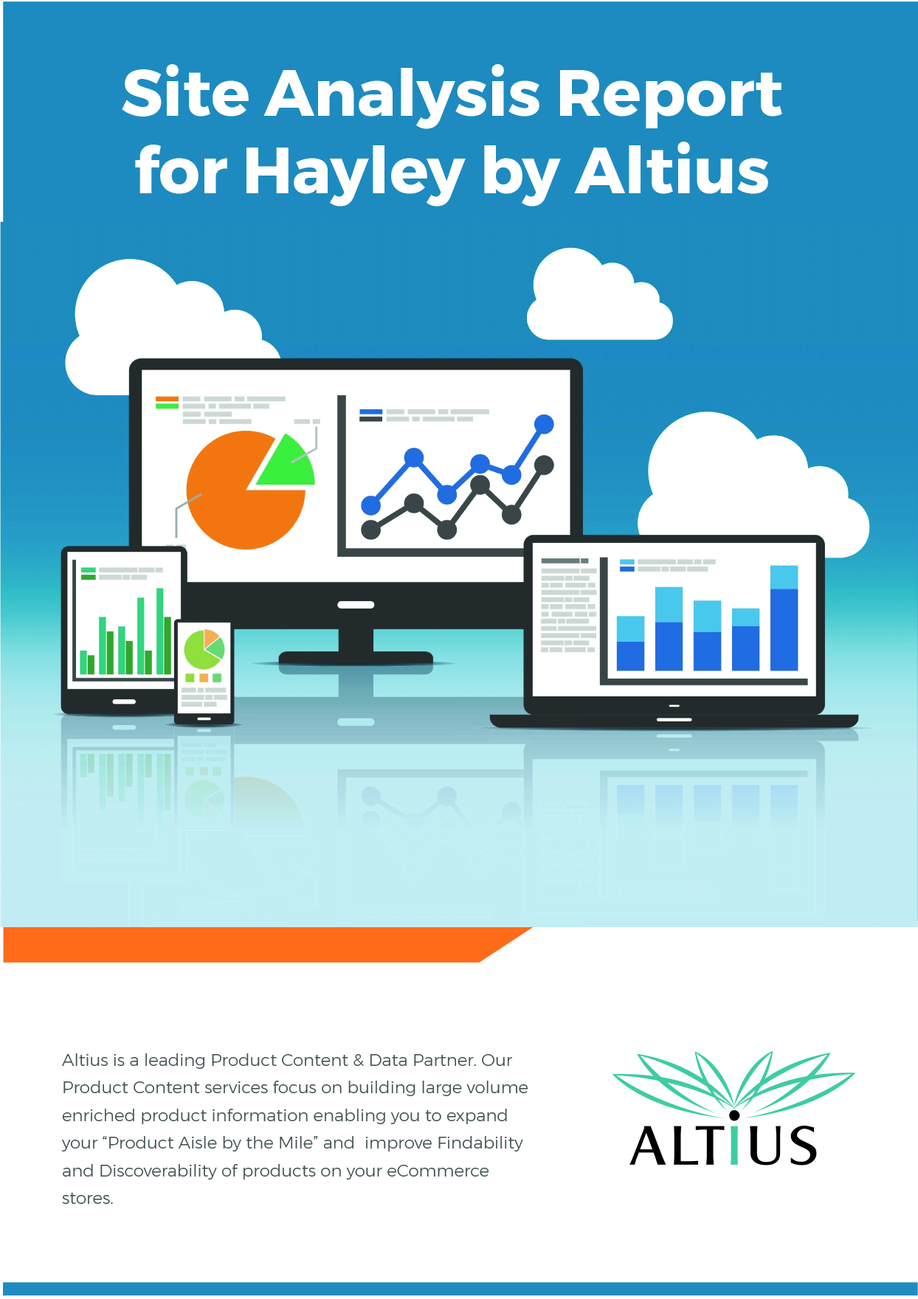
<style>
.page{position:relative;width:918px;height:1299px;background:#ffffff}
.page>*{position:absolute;margin:0}
.t1{font:64.6px "Montserrat-Bold";color:#ffffff}
.t2{font:16.9px/27.7px "Montserrat-Light";color:#445254}
</style>
<div class="page">
<p class="t1" style="left:122px;top:64px;width:660px;height:143px;text-align:center">Site Analysis Report<br>for Hayley by Altius</p>
<p class="t2" style="left:61px;top:1054px;width:467px;height:150px">Altius is a leading Product Content &amp; Data Partner. Our Product Content services focus on building large volume enriched product information enabling you to expand your “Product Aisle by the Mile” and  improve Findability and Discoverability of products on your eCommerce stores.</p>
</div>
